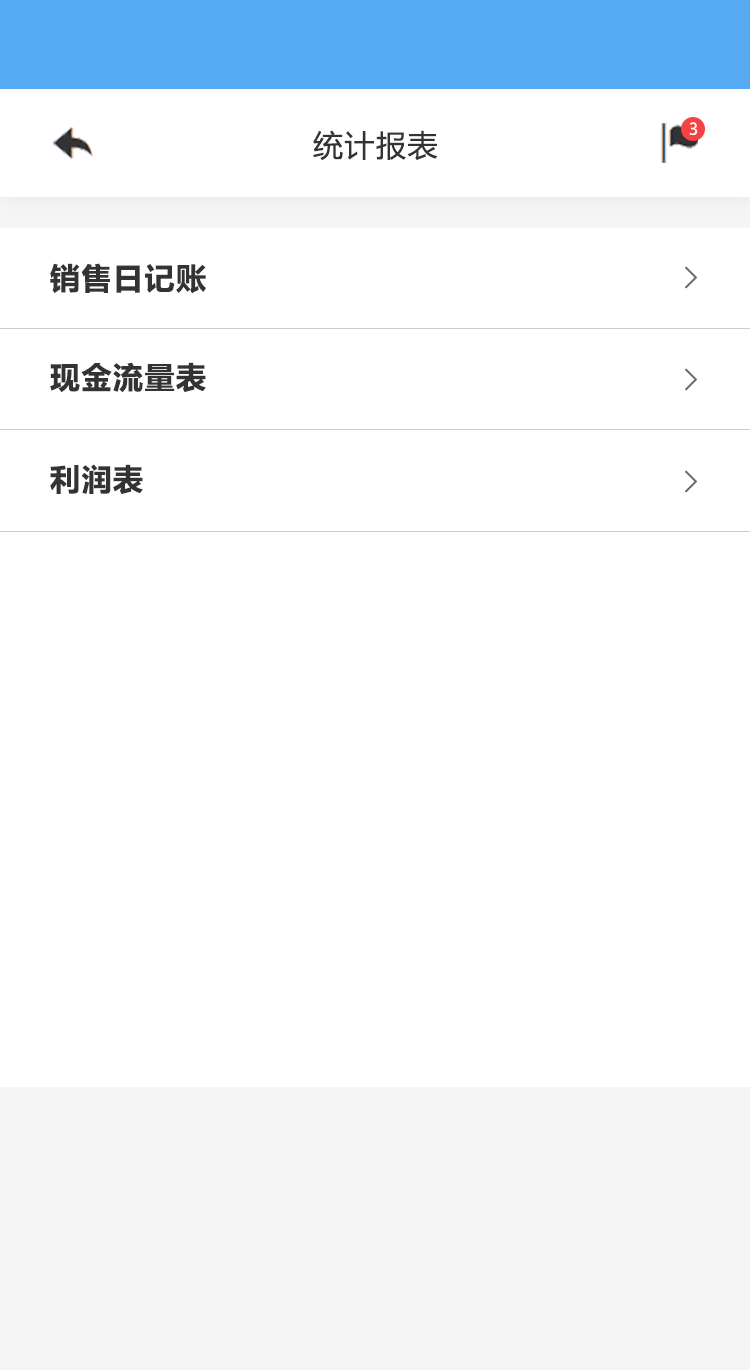
<style>
.page{position:relative;width:750px;height:1370px;background:#ffffff}
.page>*{position:absolute;margin:0}
.t1{font:16px "MicrosoftYaHeiUI";color:#ffffff}
.t2{font:30px "MicrosoftYaHeiUI";letter-spacing:0.05em;color:#333333}
.t3{font:30px "MicrosoftYaHeiUI-Bold";letter-spacing:0.05em;color:#333333}
.t4{font:30px "FangSong";letter-spacing:0.05em;color:#6c6c6c;font-weight:bold}
</style>
<div class="page">
<p class="t1" style="left:689px;top:122px;width:9px;height:13px">3</p>
<p class="t2" style="left:313px;top:130px;width:125px;height:31px">统计报表</p>
<p class="t3" style="left:50px;top:263px;width:156px;height:31px">销售日记账</p>
<p class="t4" style="left:685px;top:266px;width:12px;height:23px">&gt;</p>
<p class="t3" style="left:50px;top:362px;width:156px;height:31px">现金流量表</p>
<p class="t4" style="left:685px;top:368px;width:12px;height:23px">&gt;</p>
<p class="t3" style="left:50px;top:464px;width:93px;height:31px">利润表</p>
<p class="t4" style="left:685px;top:470px;width:12px;height:23px">&gt;</p>
</div>
